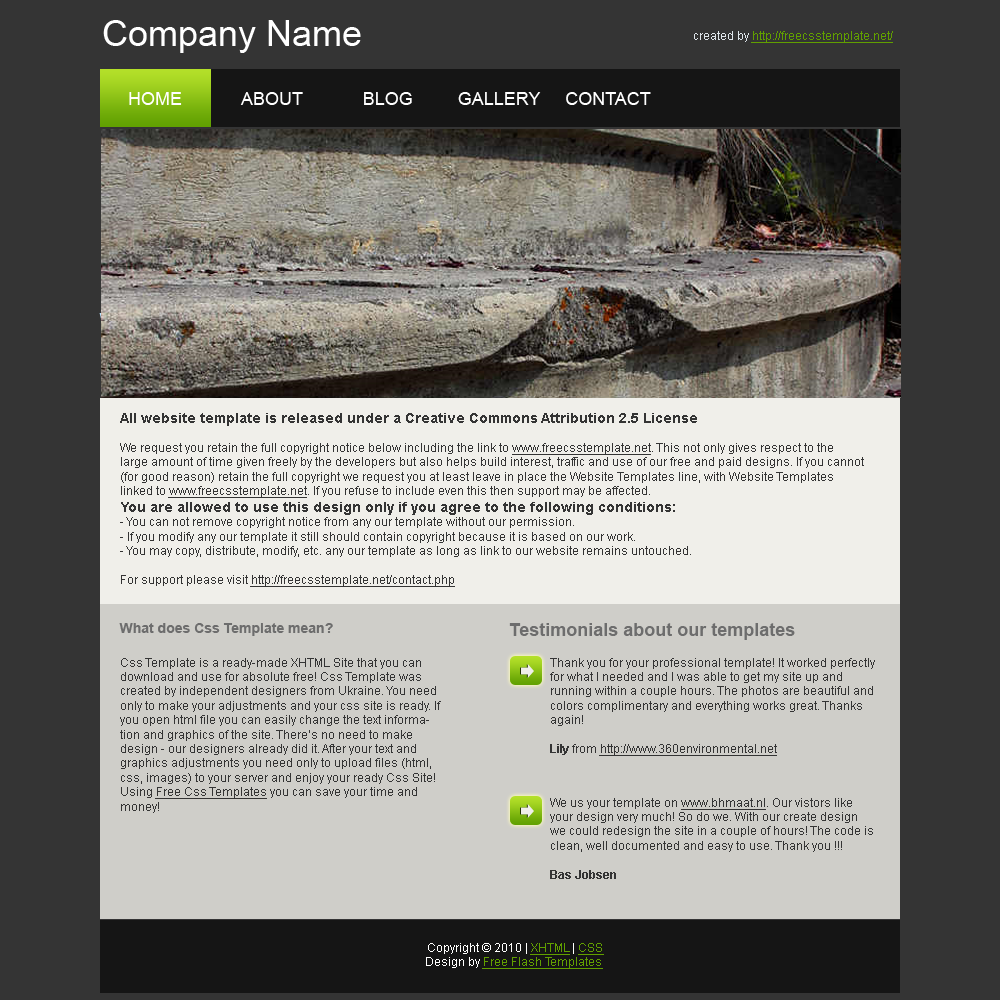
<style>
.page{position:relative;width:1000px;height:1000px;background:#343434}
.page>*{position:absolute;margin:0}
.t1{font:36px "ArialMT";color:#ffffff}
.t2{font:12px "ArialMT";color:#619f00;text-decoration:underline}
.t3{font:12px "ArialMT";color:#dee5ea}
.t4{font:18px "ArialMT";color:#ffffff}
.t5{font:12px "ArialMT";color:#343434}
.t6{font:14px "Arial-BoldMT";color:#343434}
.t7{font:12px "ArialMT";color:#343434;text-decoration:underline}
.t8{font:14px "Arial-BoldMT";color:#6d6d6d}
.t9{font:18px "Arial-BoldMT";color:#6d6d6d}
.t10{font:12px "Arial-BoldMT";color:#343434}
.t11{font:12px "ArialMT";color:#fffffe}
</style>
<div class="page">
<p class="t1" style="left:103px;top:20px;width:258px;height:33px">Company Name</p>
<p class="t2" style="left:694px;top:31px;width:199px;height:12px"><span class="t3">created by </span>http://freecsstemplate.net/</p>
<p class="t4" style="left:129px;top:92px;width:522px;height:13px">HOME            ABOUT            BLOG         GALLERY     CONTACT</p>
<p class="t5" style="left:120px;top:413px;width:744px;height:174px"><span class="t6">All website template is released under a Creative Commons Attribution 2.5 License<br></span><br>We request you retain the full copyright notice below including the link to <span class="t7">www.freecsstemplate.net</span>. This not only gives respect to the large amount of time given freely by the developers but also helps build interest, traffic and use of our free and paid designs. If you cannot (for good reason) retain the full copyright we request you at least leave in place the Website Templates line, with Website Templates linked to <span class="t7">www.freecsstemplate.net</span>. If you refuse to include even this then support may be affected. <br><span class="t6">You are allowed to use this design only if you agree to the following conditions:<br></span>- You can not remove copyright notice from any our template without our permission.<br>- If you modify any our template it still should contain copyright because it is based on our work.<br>- You may copy, distribute, modify, etc. any our template as long as link to our website remains untouched.<br><br>For support please visit <span class="t7">http://freecsstemplate.net/contact.php</span></p>
<p class="t8" style="left:119px;top:623px;width:214px;height:13px">What does Css Template mean?</p>
<p class="t9" style="left:509px;top:623px;width:286px;height:17px">Testimonials about our templates</p>
<p class="t5" style="left:120px;top:658px;width:321px;height:155px">Css Template is a ready-made XHTML Site that you can download and use for absolute free! Css Template was created by independent designers from Ukraine. You need only to make your adjustments and your css site is ready. If you open html file you can easily change the text information and graphics of the site. There’s no need to make design - our designers already did it. After your text and graphics adjustments you need only to upload files (html, css, images) to your server and enjoy your ready Css Site! Using <span class="t7">Free Css Templates</span> you can save your time and money!</p>
<p class="t5" style="left:550px;top:658px;width:325px;height:98px">Thank you for your professional template! It worked perfectly for what I needed and I was able to get my site up and running within a couple hours. The photos are beautiful and colors complimentary and everything works great. Thanks again!<br><br><span class="t10">Lily</span> from <span class="t7">http://www.360environmental.net</span></p>
<p class="t5" style="left:550px;top:798px;width:323px;height:81px">We us your template on <span class="t7">www.bhmaat.nl</span>. Our vistors like your design very much! So do we. With our create design we could redesign the site in a couple of hours! The code is clean, well documented and easy to use. Thank you !!!<br><br><span class="t10">Bas Jobsen</span></p>
<p class="t2" style="left:426px;top:943px;width:178px;height:26px;text-align:center"><span class="t11">Copyright © 2010 | </span>XHTML<span class="t11"> | </span>CSS<br><span class="t11">Design by </span>Free Flash Templates</p>
</div>
